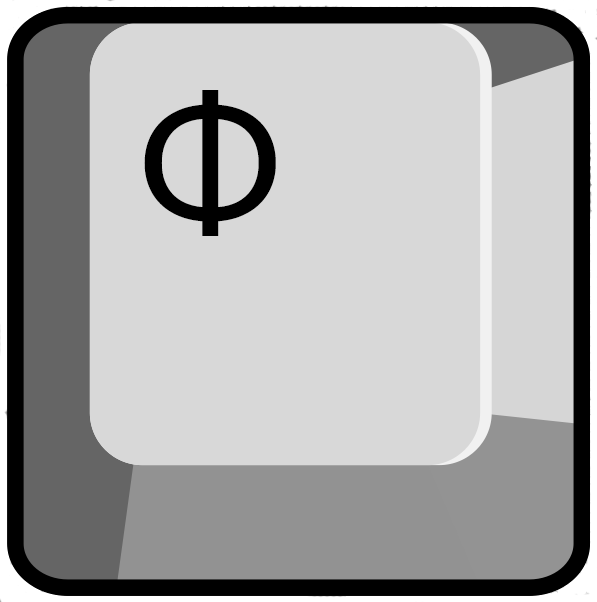
<style>
.page{position:relative;width:597px;height:602px;background:#d8d8d8}
.page>*{position:absolute;margin:0}
.t1{font:200px "Corbel";color:#000000}
</style>
<div class="page">
<p class="t1" style="left:144px;top:90px;width:132px;height:146px">Φ</p>
</div>
